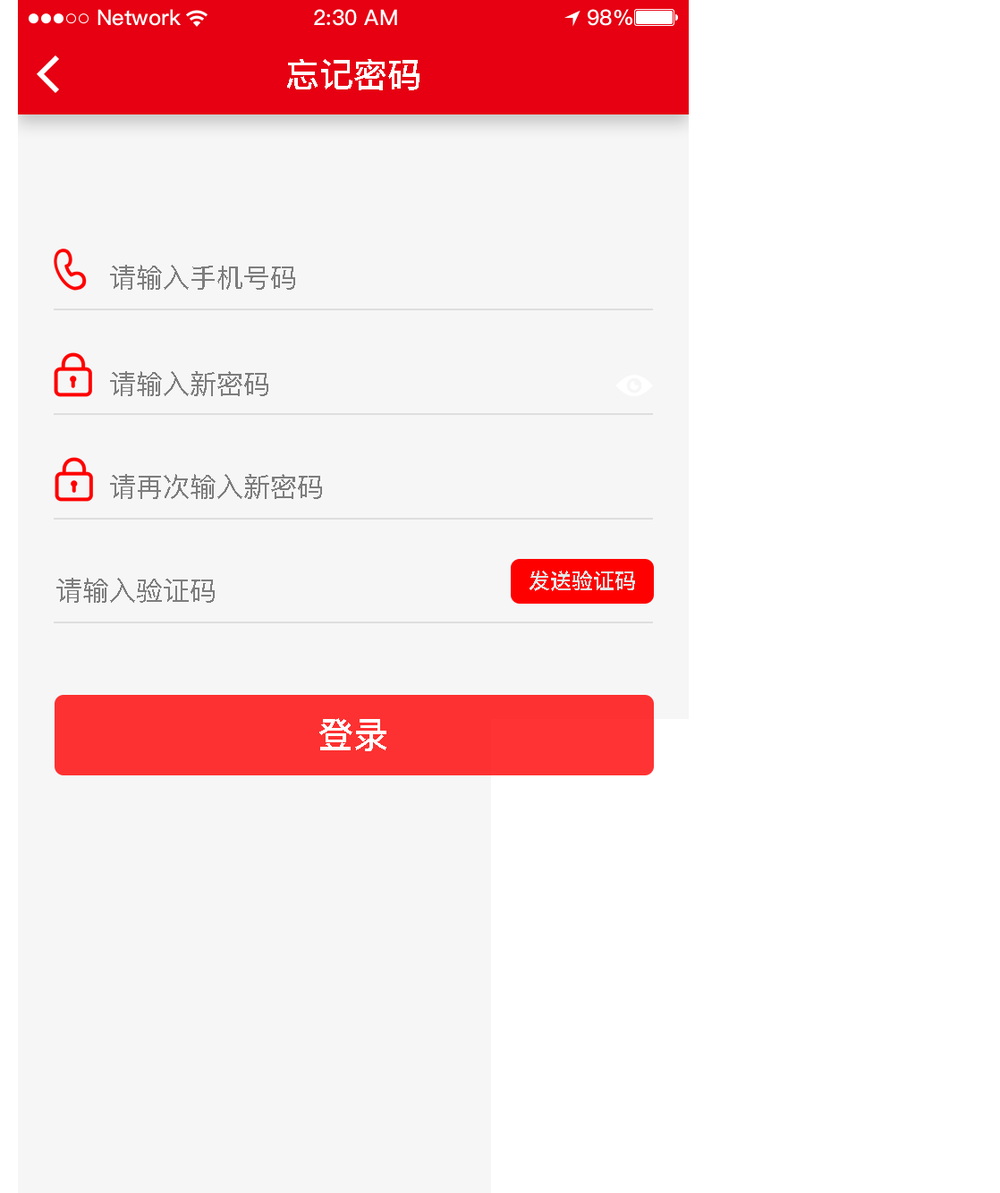
<style>
.page{position:relative;width:1000px;height:1193px;background:#f6f6f6}
.page>*{position:absolute;margin:0}
.t1{font:34px "PingFangSC-Medium";color:#ffffff;text-transform:uppercase}
.t2{font:26.8px "PingFangSC-Regular";color:#7d7d7d;text-transform:uppercase}
.t3{font:21.5px "PingFangSC-Medium";color:#e5e5e5;text-transform:uppercase}
.t4{font:35.8px "PingFangSC-Medium";color:#ffffff;text-transform:uppercase}
</style>
<div class="page">
<p class="t1" style="left:287px;top:59px;width:132px;height:31px">忘记密码</p>
<p class="t2" style="left:110px;top:265px;width:185px;height:25px">请输入手机号码</p>
<p class="t2" style="left:110px;top:371px;width:158px;height:25px">请输入新密码</p>
<p class="t2" style="left:110px;top:474px;width:212px;height:25px">请再次输入新密码</p>
<p class="t2" style="left:56px;top:578px;width:159px;height:25px">请输入验证码</p>
<p class="t3" style="left:529px;top:570px;width:106px;height:21px">发送验证码</p>
<p class="t4" style="left:319px;top:718px;width:67px;height:33px">登录</p>
</div>
